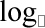
<style>
.page{position:relative;width:45px;height:28px;background:#ffffff}
.page>*{position:absolute;margin:0}
.t1{font:30px "TimesNewRomanPSMT";color:#000000}
</style>
<div class="page">
<p class="t1" style="left:0px;top:0px;width:37px;height:28px">log</p>
</div>
